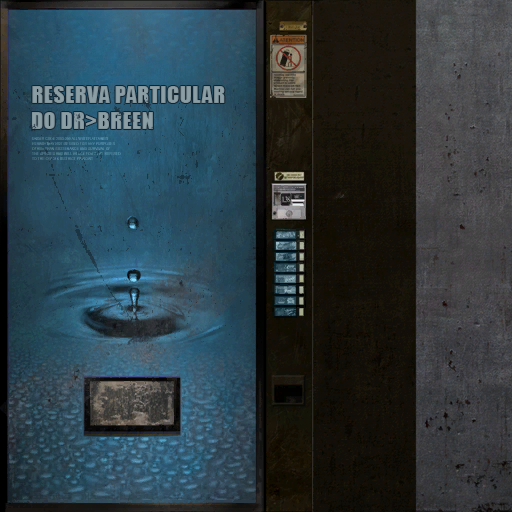
<style>
.page{position:relative;width:512px;height:512px}
.page>*{position:absolute;margin:0}
.t1{font:22px "Impact";letter-spacing:0.02em;color:#8c9ea5}
</style>
<div class="page">
<p class="t1" style="left:32px;top:86px;width:193px;height:17px">RESERVA PARTICULAR</p>
<p class="t1" style="left:31px;top:112px;width:122px;height:17px">DO DR&gt;BREEN</p>
</div>
